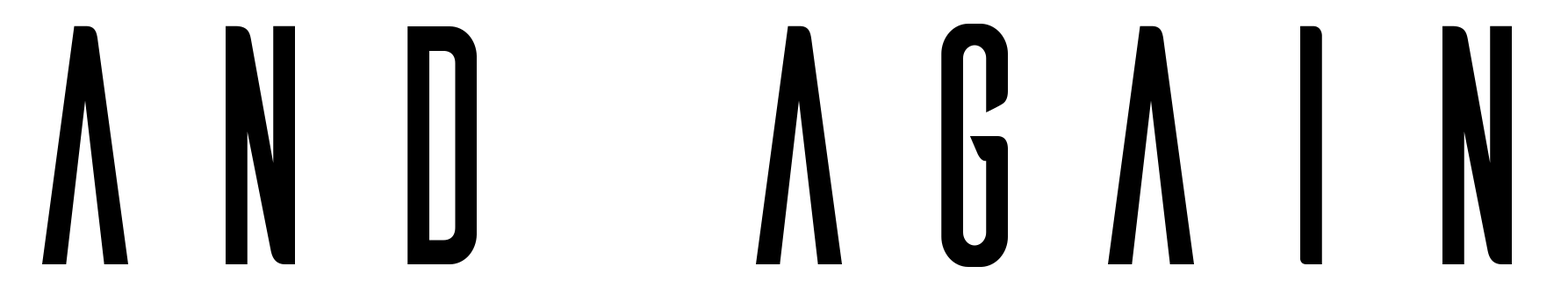
<style>
.page{position:relative;width:1568px;height:288px;background:#ffffff}
.page>*{position:absolute;margin:0}
.t1{font:340.2px "Ailerons-Regular";color:#000000;scale:0.89 1}
</style>
<div class="page">
<p class="t1" style="left:42px;top:24px;width:1470px;height:243px">and again</p>
</div>
